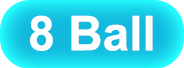
<style>
.page{position:relative;width:184px;height:68px}
.page>*{position:absolute;margin:0}
.t1{font:48px "Arial-BoldMT";color:#ffffff}
</style>
<div class="page">
<p class="t1" style="left:30px;top:15px;width:123px;height:36px">8 Ball</p>
</div>
